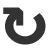
<style>
.page{position:relative;width:50px;height:50px;background:#ffffff}
.page>*{position:absolute;margin:0}
.t1{font:70px "Menlo-Bold";letter-spacing:0.007em;color:#333333;scale:1.1 1}
</style>
<div class="page">
<p class="t1" style="left:3px;top:7px;width:43px;height:38px">↻</p>
</div>
